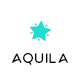
<style>
.page{position:relative;width:80px;height:80px;background:#ffffff}
.page>*{position:absolute;margin:0}
.t1{font:12px "Aquatico-Regular";letter-spacing:0.05em;color:#000000;text-transform:uppercase}
</style>
<div class="page">
<p class="t1" style="left:12px;top:53px;width:56px;height:12px">AQUila</p>
</div>
